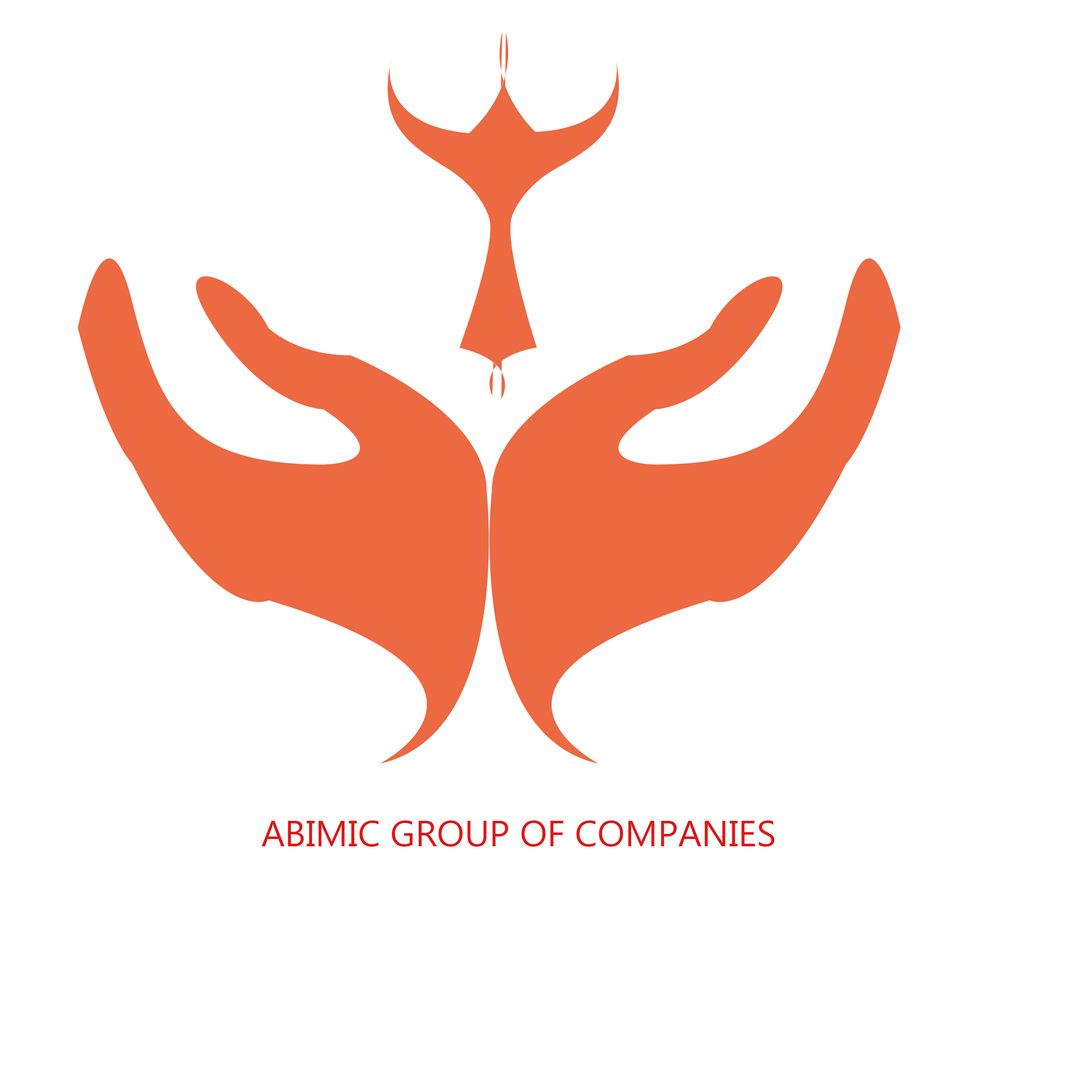
<style>
.page{position:relative;width:1092px;height:1092px;background:#ffffff}
.page>*{position:absolute;margin:0}
.t1{font:36.4px "Gadugi";color:#df1616}
</style>
<div class="page">
<p class="t1" style="left:262px;top:820px;width:513px;height:27px">ABIMIC GROUP OF COMPANIES</p>
</div>
